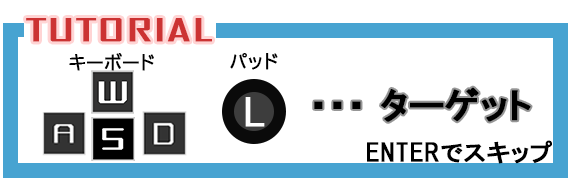
<style>
.page{position:relative;width:570px;height:180px;background:#ffffff}
.page>*{position:absolute;margin:0}
.t1{font:30px "AgencyFB-Reg";color:#cc3333;font-weight:bold;scale:2 1}
.t2{font:18px "BIZ-UDPGothic";color:#000000;font-weight:bold}
.t3{font:36px "HGPGothicE";color:#000000;font-weight:bold}
.t4{font:36px "BIZ-UDPGothic";color:#ffffff;font-weight:bold}
.t5{font:24px "HGPGothicE";color:#000000;font-weight:bold}
</style>
<div class="page">
<p class="t1" style="left:26px;top:18px;width:186px;height:24px">TUTORIAL</p>
<p class="t2" style="left:69px;top:53px;width:85px;height:18px">キーボード</p>
<p class="t2" style="left:230px;top:53px;width:48px;height:17px">パッド</p>
<p class="t3" style="left:314px;top:87px;width:217px;height:35px">・・・ ターゲット</p>
<p class="t4" style="left:245px;top:97px;width:20px;height:30px">L</p>
<p class="t5" style="left:367px;top:140px;width:185px;height:24px">ENTERでスキップ</p>
</div>
